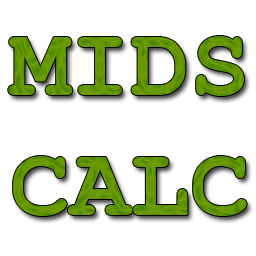
<style>
.page{position:relative;width:256px;height:256px;background:#ffffff}
.page>*{position:absolute;margin:0}
.t1{font:100px "CourierNewPS-BoldMT";color:#639602}
</style>
<div class="page">
<p class="t1" style="left:8px;top:36px;width:239px;height:180px">MIDS<br>CALC</p>
</div>
